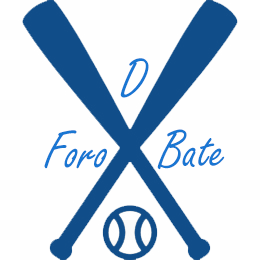
<style>
.page{position:relative;width:260px;height:260px;background:#fefefe}
.page>*{position:absolute;margin:0}
.t1{font:57.8px "FreestyleScript-Regular";color:#1976d2;scale:0.95 1}
.t2{font:57.8px "FreestyleScript-Regular";color:#1976d2;scale:0.94 1}
</style>
<div class="page">
<p class="t1" style="left:120px;top:58px;width:29px;height:40px">D</p>
<p class="t1" style="left:44px;top:130px;width:63px;height:39px">Foro</p>
<p class="t2" style="left:157px;top:129px;width:68px;height:41px">Bate</p>
</div>
